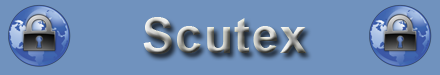
<style>
.page{position:relative;width:440px;height:75px;background:#7092be}
.page>*{position:absolute;margin:0}
.t1{font:48px "Arial-BoldMT";letter-spacing:0.03em}
</style>
<div class="page">
<p class="t1" style="left:143px;top:17px;width:164px;height:37px">Scutex</p>
</div>
